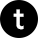
<style>
.page{position:relative;width:38px;height:38px;background:#000000}
.page>*{position:absolute;margin:0}
.t1{font:29.7px "GoogleSans-Medium";color:#ffffff}
</style>
<div class="page">
<p class="t1" style="left:13px;top:9px;width:11px;height:21px">t</p>
</div>
